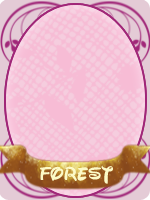
<style>
.page{position:relative;width:150px;height:200px}
.page>*{position:absolute;margin:0}
.t1{font:37.4px "Waltograph";color:#fcfac7}
</style>
<div class="page">
<p class="t1" style="left:40px;top:165px;width:73px;height:19px">forest</p>
</div>
